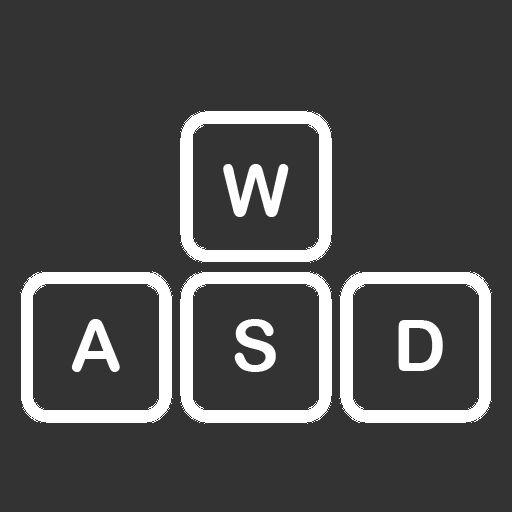
<style>
.page{position:relative;width:512px;height:512px;background:#333333}
.page>*{position:absolute;margin:0}
.t1{font:72px "ArialRoundedMTBold";letter-spacing:0.05em;color:#ffffff;text-transform:uppercase}
</style>
<div class="page">
<p class="t1" style="left:223px;top:164px;width:66px;height:53px">W</p>
<p class="t1" style="left:71px;top:319px;width:49px;height:53px">A</p>
<p class="t1" style="left:234px;top:319px;width:42px;height:53px">S</p>
<p class="t1" style="left:398px;top:320px;width:45px;height:51px">D</p>
</div>
